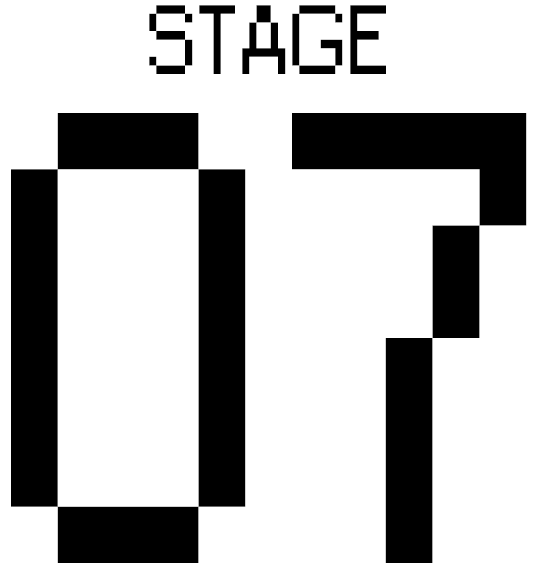
<style>
.page{position:relative;width:537px;height:574px;background:#ffffff}
.page>*{position:absolute;margin:0}
.t1{font:91.7px "Small Fonts";color:#000000}
.t2{font:600px "Small Fonts";color:#000000}
</style>
<div class="page">
<p class="t1" style="left:149px;top:5px;width:237px;height:69px">STAGE</p>
<p class="t2" style="left:11px;top:113px;width:516px;height:450px">07</p>
</div>
